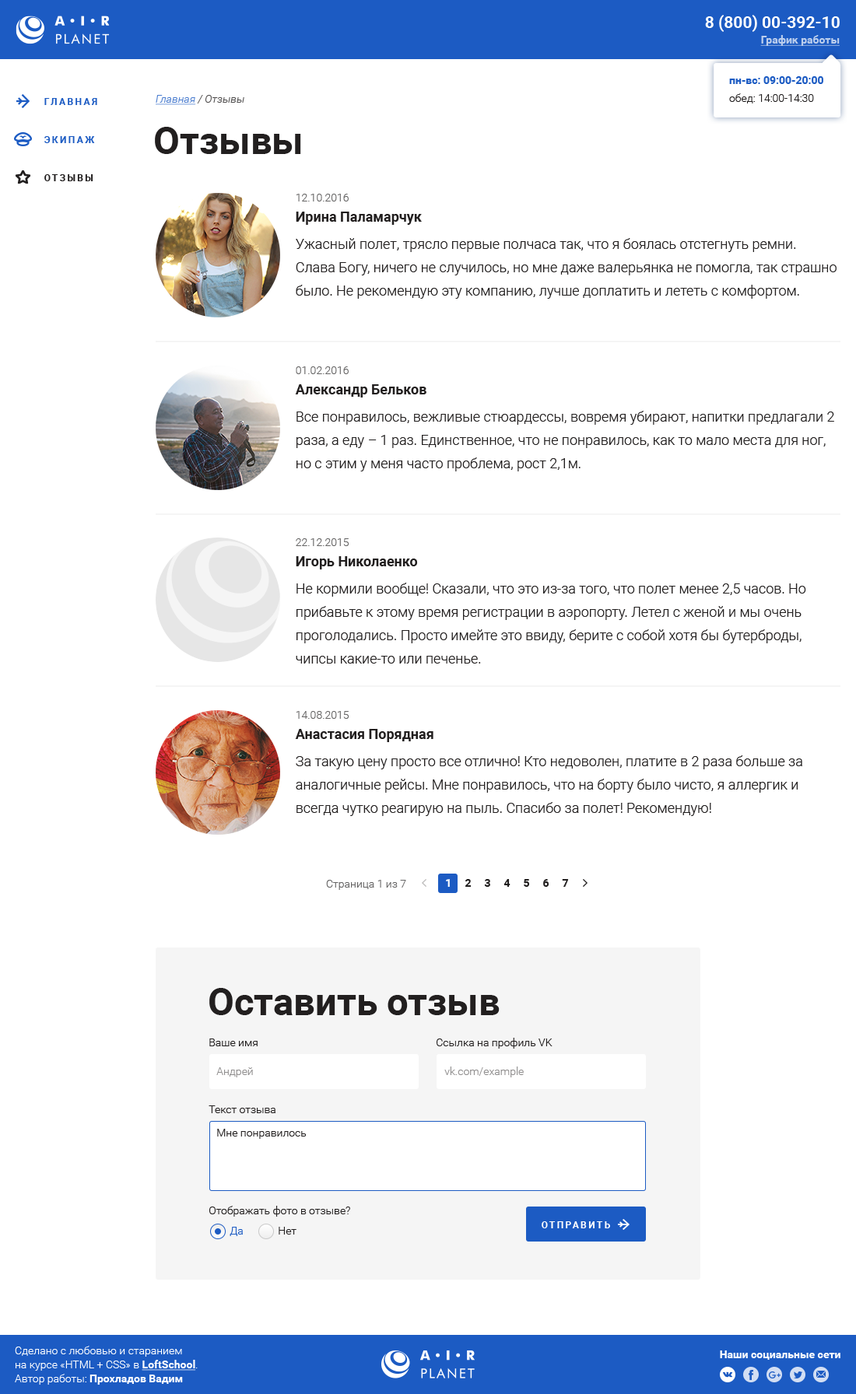
<style>
.page{position:relative;width:856px;height:1394px;background:#ffffff}
.page>*{position:absolute;margin:0}
.t1{font:16.3px "Roboto-Bold";color:#ffffff;text-transform:uppercase}
.t2{font:10.9px "Roboto-Bold";color:#bbceed;text-decoration:underline}
.t3{font:10.9px/14px "Roboto-Bold";color:#1c5bc3}
.t4{font:10.9px/14px "Roboto-Light";color:#221f1f}
.t5{font:9.3px "Roboto-Bold";letter-spacing:0.2em;color:#1c5bc3;text-transform:uppercase}
.t6{font:10.9px "Roboto-LightItalic"}
.t7{font:10.9px "Roboto-LightItalic";text-decoration:underline}
.t8{font:38.1px "Roboto-Bold";color:#221f1f}
.t9{font:9.3px "Roboto-Bold";letter-spacing:0.2em;color:#221f1f;text-transform:uppercase}
.t10{font:14px/23.3px "Roboto-Light";color:#221f1f}
.t11{font:10.9px/16.3px "Roboto-Light";color:#656464}
.t12{font:14px/16.3px "Roboto-Bold";color:#221f1f}
.t13{font:10.9px "Roboto-Light";color:#656464}
.t14{font:10.9px "Roboto-Bold";color:#ffffff}
.t15{font:10.9px "Roboto-Bold";color:#221f1f}
.t16{font:10.9px "Roboto-Light";color:#221f1f}
.t17{font:10.9px "Roboto-Light";color:#908f8f}
.t18{font:10.9px "Roboto-Light";color:#1c5bc3}
.t19{font:9.3px "Roboto-Bold";letter-spacing:0.2em;color:#ffffff;text-transform:uppercase}
.t20{font:10.9px/14px "Roboto-Light";color:#ffffff}
.t21{font:10.9px/14px "Roboto-Bold";color:#ffffff;text-decoration:underline}
.t22{font:10.9px/14px "Roboto-Bold";color:#ffffff}
</style>
<div class="page">
<p class="t1" style="left:705px;top:15px;width:134px;height:17px">8 (800) 00-392-10</p>
<p class="t2" style="left:760px;top:35px;width:79px;height:11px">График работы</p>
<p class="t3" style="left:729px;top:76px;width:94px;height:27px">пн-вс: 09:00-20:00<br><span class="t4">обед: 14:00-14:30</span></p>
<p class="t5" style="left:44px;top:98px;width:53px;height:7px">Главная</p>
<p class="t6" style="left:156px;top:95px;width:88px;height:10px"><span class="t7">Главная</span> / Отзывы</p>
<p class="t5" style="left:44px;top:136px;width:51px;height:7px">Экипаж</p>
<p class="t8" style="left:155px;top:127px;width:146px;height:27px">Отзывы</p>
<p class="t9" style="left:44px;top:174px;width:49px;height:7px">Отзывы</p>
<p class="t10" style="left:296px;top:194px;width:540px;height:105px"><span class="t11">12.10.2016<br></span><span class="t12">Ирина Паламарчук<br></span>Ужасный полет, трясло первые полчаса так, что я боялась отстегнуть ремни. Слава Богу, ничего не случилось, но мне даже валерьянка не помогла, так страшно было. Не рекомендую эту компанию, лучше доплатить и лететь с комфортом.</p>
<p class="t10" style="left:295px;top:366px;width:539px;height:105px"><span class="t11">01.02.2016<br></span><span class="t12">Александр Бельков<br></span>Все понравилось, вежливые стюардессы, вовремя убирают, напитки предлагали 2 раза, а еду – 1 раз. Единственное, что не понравилось, как то мало места для ног, но с этим у меня часто проблема, рост 2,1м.</p>
<p class="t10" style="left:296px;top:538px;width:510px;height:125px"><span class="t11">22.12.2015<br></span><span class="t12">Игорь Николаенко<br></span>Не кормили вообще! Сказали, что это из-за того, что полет менее 2,5 часов. Но прибавьте к этому время регистрации в аэропорту. Летел с женой и мы очень проголодались. Просто имейте это ввиду, берите с собой хотя бы бутерброды, чипсы какие-то или печенье.</p>
<p class="t10" style="left:295px;top:711px;width:507px;height:105px"><span class="t11">14.08.2015<br></span><span class="t12">Анастасия Порядная<br></span>За такую цену просто все отлично! Кто недоволен, платите в 2 раза больше за аналогичные рейсы. Мне понравилось, что на борту было чисто, я аллергик и всегда чутко реагирую на пыль. Спасибо за полет! Рекомендую!</p>
<p class="t13" style="left:326px;top:880px;width:80px;height:10px">Страница 1 из 7</p>
<p class="t14" style="left:446px;top:879px;width:4px;height:8px">1</p>
<p class="t15" style="left:465px;top:879px;width:6px;height:8px">2</p>
<p class="t15" style="left:484px;top:879px;width:6px;height:8px">3</p>
<p class="t15" style="left:503px;top:879px;width:7px;height:8px">4</p>
<p class="t15" style="left:523px;top:879px;width:7px;height:8px">5</p>
<p class="t15" style="left:543px;top:879px;width:6px;height:8px">6</p>
<p class="t15" style="left:562px;top:879px;width:7px;height:8px">7</p>
<p class="t8" style="left:209px;top:988px;width:290px;height:27px">Оставить отзыв</p>
<p class="t16" style="left:436px;top:1038px;width:116px;height:10px">Ссылка на профиль VK</p>
<p class="t16" style="left:209px;top:1038px;width:48px;height:8px">Ваше имя</p>
<p class="t17" style="left:216px;top:1067px;width:37px;height:10px">Андрей</p>
<p class="t17" style="left:444px;top:1066px;width:79px;height:11px">vk.com/example</p>
<p class="t16" style="left:208px;top:1105px;width:67px;height:8px">Текст отзыва</p>
<p class="t16" style="left:217px;top:1129px;width:89px;height:10px">Мне понравилось</p>
<p class="t16" style="left:209px;top:1206px;width:141px;height:10px">Отображать фото в отзыве?</p>
<p class="t18" style="left:229px;top:1227px;width:14px;height:9px">Да</p>
<p class="t16" style="left:278px;top:1227px;width:18px;height:7px">Нет</p>
<p class="t19" style="left:541px;top:1221px;width:69px;height:7px">Отправить</p>
<p class="t20" style="left:15px;top:1346px;width:183px;height:38px">Сделано с любовью и старанием<br>на курсе «HTML + CSS» в <span class="t21">LoftSchool</span>.<br>Автор работы: <span class="t22">Прохладов Вадим</span></p>
<p class="t14" style="left:719px;top:1350px;width:121px;height:10px">Наши социальные сети</p>
</div>
